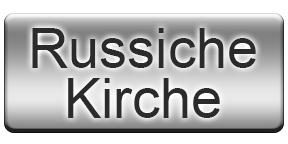
<style>
.page{position:relative;width:288px;height:144px;background:#ffffff}
.page>*{position:absolute;margin:0}
.t1{font:56px/50px "ArialMT";color:#2b2b2b}
</style>
<div class="page">
<p class="t1" style="left:32px;top:28px;width:224px;height:90px;text-align:center">Russiche<br>Kirche</p>
</div>
